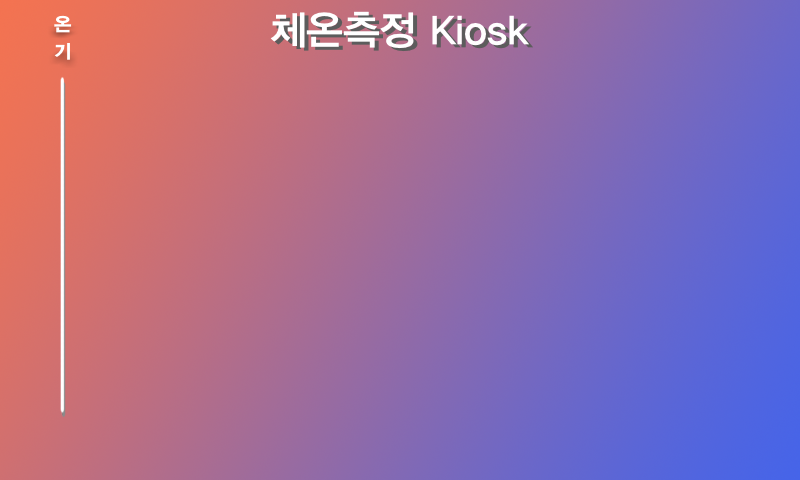
<style>
.page{position:relative;width:800px;height:480px}
.page>*{position:absolute;margin:0}
.t1{font:18.9px/26.5px "YDIYGO360";letter-spacing:-0.006em;color:#ffffff}
.t2{font:40px "YDIYGO340";letter-spacing:-0.006em;color:#ffffff}
.t3{font:40px "YDIYGO340";letter-spacing:-0.006em}
</style>
<div class="page">
<p class="t1" style="left:54px;top:15px;width:18px;height:45px">온<br>기</p>
<p class="t2" style="left:270px;top:11px;width:259px;height:38px">체온측정 Kiosk</p>
<p class="t3" style="left:274px;top:14px;width:259px;height:38px">체온측정 Kiosk</p>
</div>
